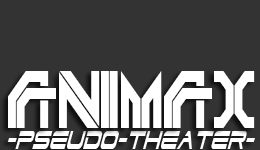
<style>
.page{position:relative;width:260px;height:150px;background:#333333}
.page>*{position:absolute;margin:0}
.t1{font:78.9px "DEPLETEDURANIUM";color:#ffffff;scale:0.7 1}
.t2{font:31.6px "DodgerCondensedItalic";color:#ffffff;scale:0.63 1}
</style>
<div class="page">
<p class="t1" style="left:8px;top:71px;width:247px;height:57px">ANIMAX</p>
<p class="t2" style="left:7px;top:131px;width:248px;height:18px">-PSEUDO-THEATER-</p>
</div>
